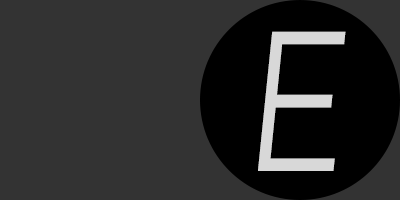
<style>
.page{position:relative;width:400px;height:200px;background:#333333}
.page>*{position:absolute;margin:0}
.t1{font:194.7px "JosefinSans";color:#d8d8d8;scale:0.83 1}
</style>
<div class="page">
<p class="t1" style="left:258px;top:31px;width:88px;height:140px">E</p>
</div>
